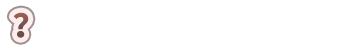
<style>
.page{position:relative;width:360px;height:50px;background:#ffffff}
.page>*{position:absolute;margin:0}
.t1{font:32px "SourceHanSansSC-Bold";font-weight:bold}
</style>
<div class="page">
<p class="t1" style="left:13px;top:12px;width:16px;height:26px">？</p>
</div>
